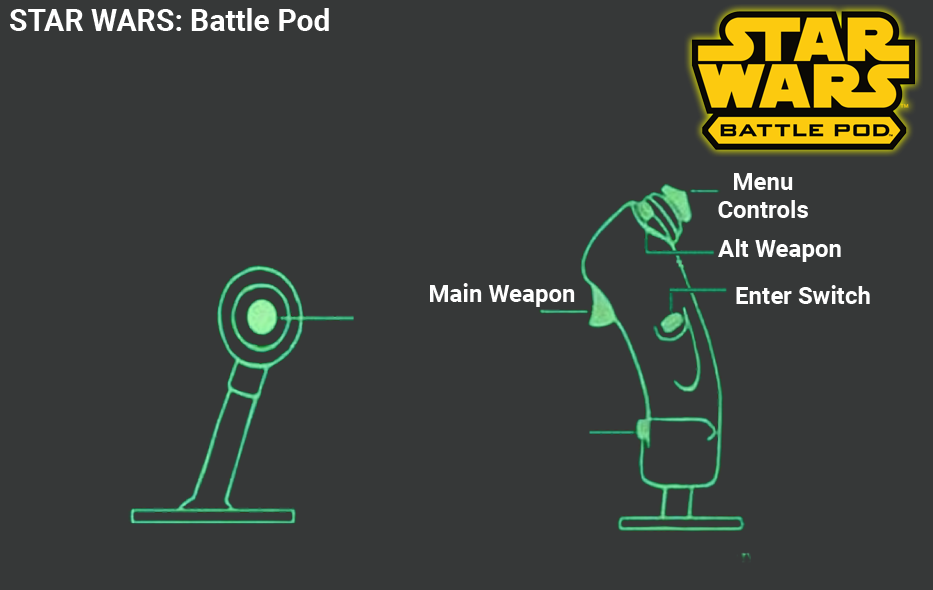
<style>
.page{position:relative;width:933px;height:590px;background:#363838}
.page>*{position:absolute;margin:0}
.t1{font:30px "Roboto-Bold";color:#ffffff}
.t2{font:24px/28px "Roboto-Bold";color:#fefefe}
.t3{font:24px "Roboto-Bold";color:#fefefe}
</style>
<div class="page">
<p class="t1" style="left:10px;top:8px;width:319px;height:23px">STAR WARS: Battle Pod</p>
<p class="t2" style="left:718px;top:173px;width:90px;height:45px;text-align:center">Menu<br>Controls</p>
<p class="t3" style="left:718px;top:239px;width:123px;height:23px">Alt Weapon</p>
<p class="t3" style="left:430px;top:283px;width:145px;height:24px">Main Weapon</p>
<p class="t3" style="left:736px;top:285px;width:134px;height:19px">Enter Switch</p>
</div>
